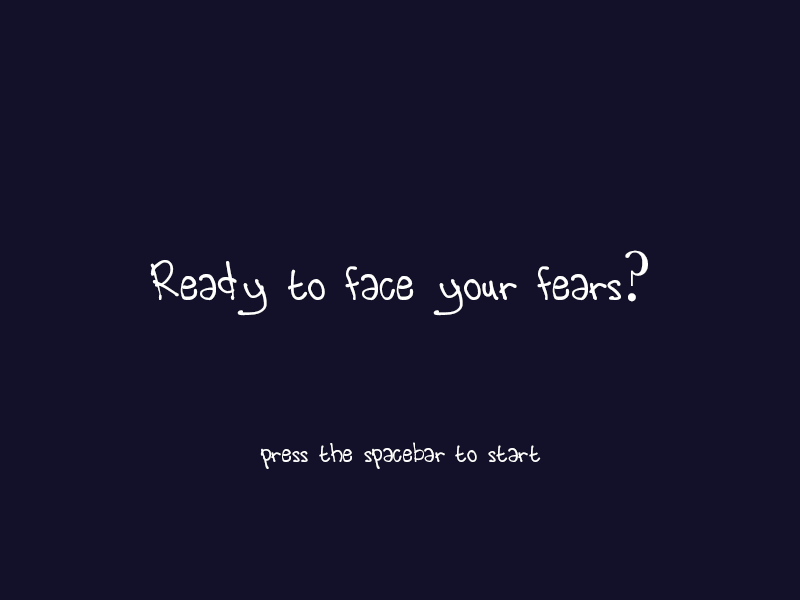
<style>
.page{position:relative;width:800px;height:600px;background:#131129}
.page>*{position:absolute;margin:0}
.t1{font:75px "CantWrite";letter-spacing:0.005em;color:#ffffff}
.t2{font:75px "Baskerville";letter-spacing:0.005em;color:#ffffff}
.t3{font:41.7px "CantWrite";letter-spacing:0.005em;color:#ffffff}
</style>
<div class="page">
<p class="t1" style="left:150px;top:250px;width:498px;height:66px">Ready to face your fears<span class="t2">?</span></p>
<p class="t3" style="left:260px;top:442px;width:281px;height:27px">press the spacebar to start</p>
</div>
